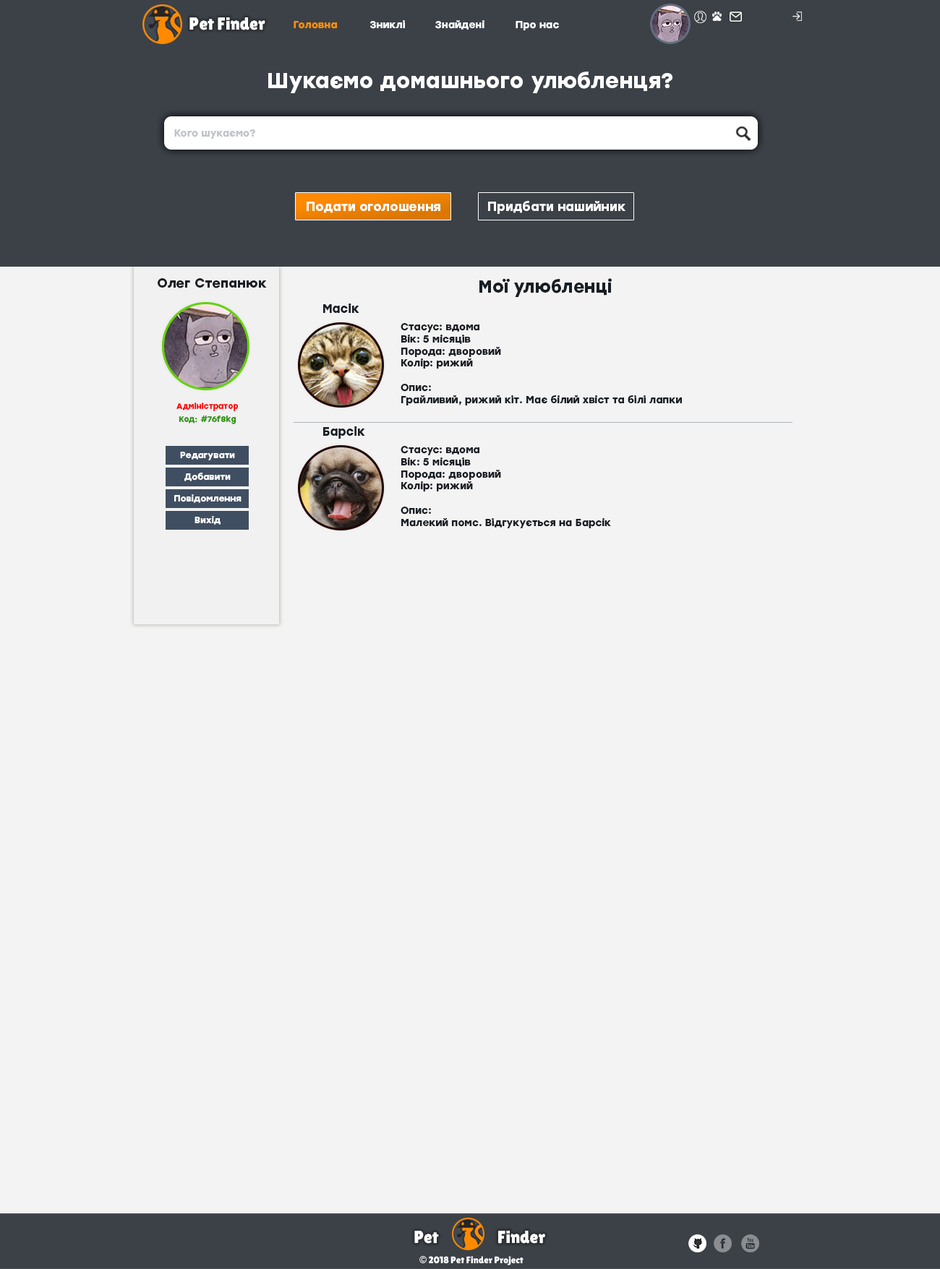
<style>
.page{position:relative;width:940px;height:1269px;background:#f4f3f3}
.page>*{position:absolute;margin:0}
.t1{font:17.3px "LilitaOne";color:#ffffff}
.t2{font:10.1px "Stolzl-Bold";color:#ff9001}
.t3{font:10.1px "Stolzl-Bold";color:#ffffff}
.t4{font:21.7px "Stolzl-Bold";color:#ffffff}
.t5{font:10.1px "Stolzl-Bold";color:#c0c4c9}
.t6{font:12.6px "Stolzl-Bold";color:#ffffff}
.t7{font:13.2px "Stolzl-Bold";color:#181e24}
.t8{font:17.3px "Stolzl-Bold";color:#181e24}
.t9{font:12.1px "Stolzl-Bold";color:#181e24}
.t10{font:10.1px "Stolzl-Bold";color:#181e24}
.t11{font:8px "Stolzl-Bold";color:#ff0000}
.t12{font:8px "Stolzl-Bold";color:#2e930e}
.t13{font:8.9px "Stolzl-Bold";color:#ffffff}
.t14{font:9.6px "LilitaOne";color:#ffffff}
.t15{font:9.6px "GillSans-UltraBold";color:#ffffff}
</style>
<div class="page">
<p class="t1" style="left:189px;top:17px;width:76px;height:13px">Pet Finder</p>
<p class="t2" style="left:293px;top:21px;width:44px;height:8px">Головна</p>
<p class="t3" style="left:370px;top:20px;width:35px;height:9px">Зниклі</p>
<p class="t3" style="left:435px;top:20px;width:49px;height:10px">Знайдені</p>
<p class="t3" style="left:515px;top:21px;width:44px;height:9px">Про нас</p>
<p class="t4" style="left:268px;top:72px;width:404px;height:21px">Шукаємо домашнього улюбленця?</p>
<p class="t5" style="left:174px;top:129px;width:81px;height:10px">Кого шукаємо?</p>
<p class="t6" style="left:306px;top:202px;width:134px;height:11px">Подати оголошення</p>
<p class="t6" style="left:488px;top:201px;width:137px;height:13px">Придбати нашийник</p>
<p class="t7" style="left:158px;top:278px;width:109px;height:10px">Олег Степанюк</p>
<p class="t8" style="left:479px;top:278px;width:132px;height:19px">Мої улюбленці</p>
<p class="t9" style="left:323px;top:303px;width:36px;height:10px">Масік</p>
<p class="t10" style="left:400px;top:323px;width:282px;height:82px">Стасус: вдома<br>Вік: 5 місяців<br>Порода: дворовий<br>Колір: рижий<br><br>Опис: <br>Грайливий, рижий кіт. Має білий хвіст та білі лапки</p>
<p class="t11" style="left:176px;top:403px;width:63px;height:8px">Адміністратор</p>
<p class="t12" style="left:179px;top:416px;width:57px;height:8px">Код: #76f8kg</p>
<p class="t9" style="left:323px;top:426px;width:42px;height:13px">Барсік</p>
<p class="t10" style="left:400px;top:446px;width:211px;height:82px">Стасус: вдома<br>Вік: 5 місяців<br>Порода: дворовий<br>Колір: рижий<br><br>Опис: <br>Малекий помс. Відгукується на Барсік</p>
<p class="t13" style="left:180px;top:452px;width:55px;height:8px">Редагувати</p>
<p class="t13" style="left:184px;top:473px;width:47px;height:8px">Добавити</p>
<p class="t13" style="left:174px;top:494px;width:67px;height:9px">Повідомлення</p>
<p class="t13" style="left:194px;top:516px;width:26px;height:9px">Вихід</p>
<p class="t1" style="left:414px;top:1231px;width:25px;height:13px">Pet</p>
<p class="t1" style="left:498px;top:1231px;width:47px;height:13px">Finder</p>
<p class="t14" style="left:419px;top:1256px;width:104px;height:10px"><span class="t15">©</span> 2018 Pet Finder Project</p>
</div>
